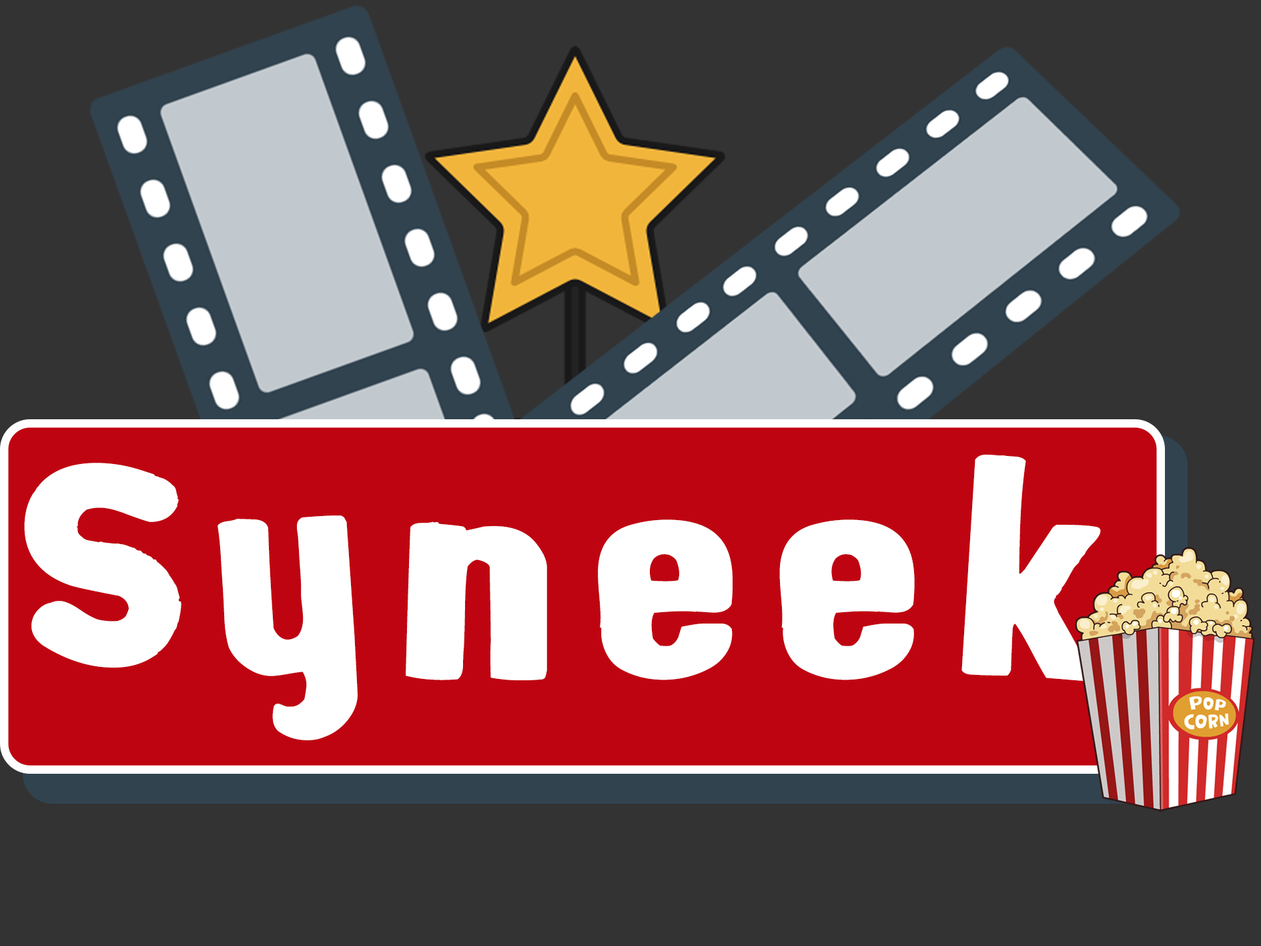
<style>
.page{position:relative;width:1261px;height:946px;background:#333333}
.page>*{position:absolute;margin:0}
.t1{font:278px "AlphaFridgeMagnets";letter-spacing:0.12em;color:#ffffff;scale:1.05 1}
</style>
<div class="page">
<p class="t1" style="left:24px;top:454px;width:1077px;height:286px">Syneek</p>
</div>
